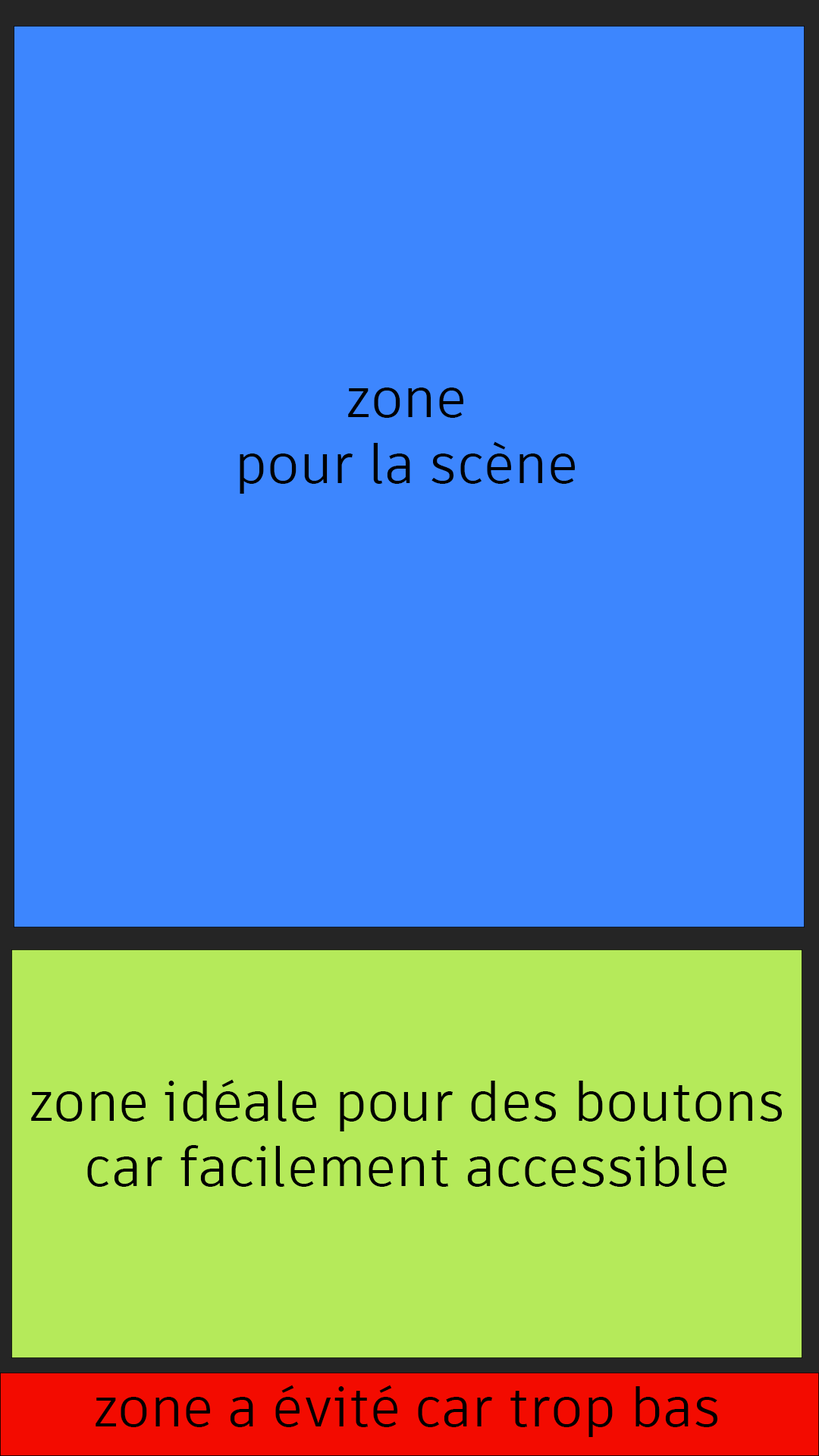
<style>
.page{position:relative;width:819px;height:1456px;background:#3d86fe}
.page>*{position:absolute;margin:0}
.t1{font:54.6px "ArtifaktElement-Regular";color:#000000}
</style>
<div class="page">
<p class="t1" style="left:240px;top:388px;width:335px;height:106px;text-align:center">zone<br>pour la scène</p>
<p class="t1" style="left:31px;top:1079px;width:751px;height:108px;text-align:center">zone idéale pour des boutons<br>car facilement accessible</p>
<p class="t1" style="left:96px;top:1385px;width:621px;height:52px">zone a évité car trop bas</p>
</div>
